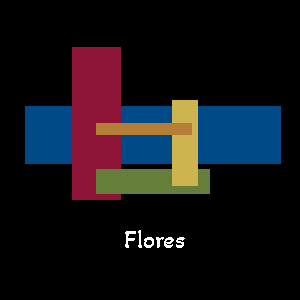
<style>
.page{position:relative;width:300px;height:300px;background:#000000}
.page>*{position:absolute;margin:0}
.t1{font:26.7px "AkayaTelivigala-Regular";color:#ffffff}
</style>
<div class="page">
<p class="t1" style="left:125px;top:230px;width:60px;height:18px">Flores</p>
</div>
